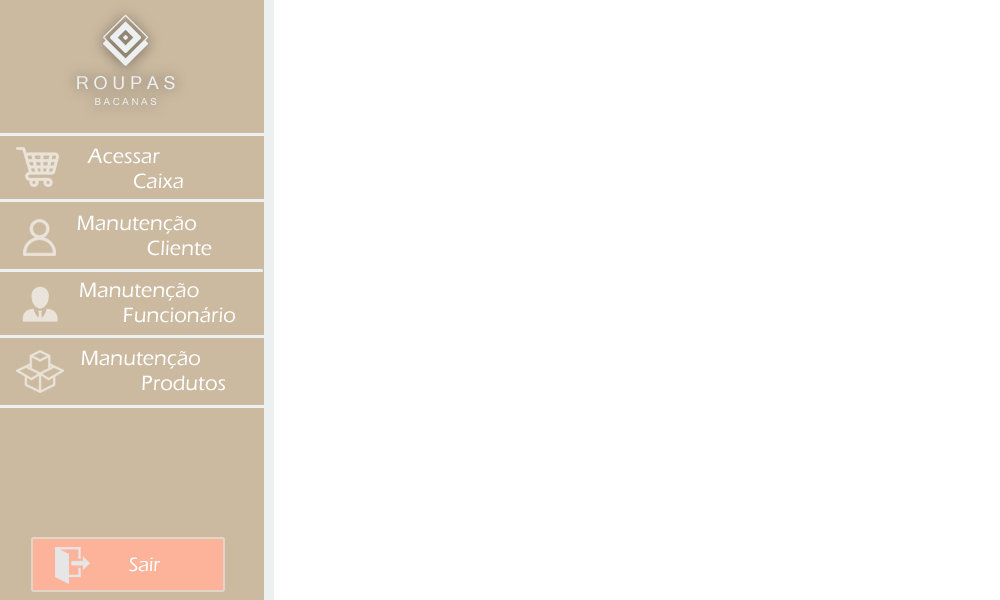
<style>
.page{position:relative;width:1000px;height:600px;background:#ffffff}
.page>*{position:absolute;margin:0}
.t1{font:17.8px "MicrosoftSansSerif";color:#ecf0f1}
.t2{font:9.7px "MicrosoftSansSerif";color:#ecf0f1}
.t3{font:21.3px "ErasITC-Medium";color:#ffffff}
.t4{font:20px "ErasITC-Medium";color:#ffffff}
</style>
<div class="page">
<p class="t1" style="left:77px;top:76px;width:98px;height:14px">R O U P A S</p>
<p class="t2" style="left:95px;top:98px;width:62px;height:7px">B A C A N A S</p>
<p class="t3" style="left:87px;top:148px;width:96px;height:41px;text-align:center">Acessar<br>             Caixa</p>
<p class="t3" style="left:77px;top:215px;width:135px;height:41px;text-align:center">Manutenção<br>                      Cliente</p>
<p class="t3" style="left:80px;top:282px;width:155px;height:41px;text-align:center">Manutenção <br>                       Funcionário</p>
<p class="t3" style="left:81px;top:350px;width:144px;height:41px;text-align:center">Manutenção <br>                         Produtos</p>
<p class="t4" style="left:129px;top:557px;width:31px;height:15px">Sair</p>
</div>
